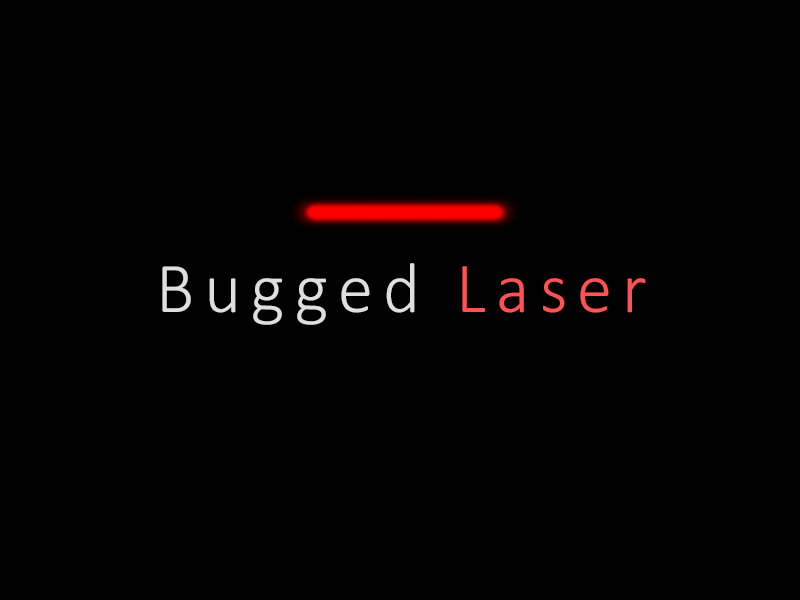
<style>
.page{position:relative;width:800px;height:600px;background:#000000}
.page>*{position:absolute;margin:0}
.t1{font:72px "Calibri-Light";letter-spacing:0.14em;color:#dfdfdf}
.t2{font:72px "Calibri-Light";letter-spacing:0.14em;color:#ff5252}
</style>
<div class="page">
<p class="t1" style="left:162px;top:263px;width:484px;height:62px">Bugged <span class="t2">Laser</span></p>
</div>
